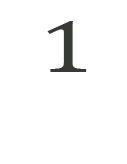
<style>
.page{position:relative;width:127px;height:164px;background:#ffffff}
.page>*{position:absolute;margin:0}
.t1{font:74.8px "CambriaMath";color:#383a35;scale:1.32 1}
</style>
<div class="page">
<p class="t1" style="left:47px;top:21px;width:40px;height:51px">1</p>
</div>
